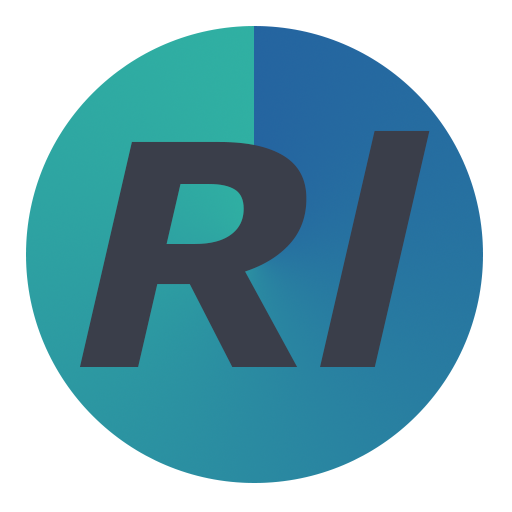
<style>
.page{position:relative;width:512px;height:512px;background:#ffffff}
.page>*{position:absolute;margin:0}
.t1{font:310px "Verdana-BoldItalic";color:#3a3e4a}
</style>
<div class="page">
<p class="t1" style="left:79px;top:130px;width:351px;height:237px">Rl</p>
</div>
